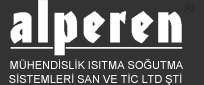
<style>
.page{position:relative;width:204px;height:85px;background:#333333}
.page>*{position:absolute;margin:0}
.t1{font:11px "ArialMT";color:#ffffff}
</style>
<div class="page">
<p class="t1" style="left:10px;top:59px;width:173px;height:10px">MÜHENDİSLİK ISITMA SOĞUTMA</p>
<p class="t1" style="left:9px;top:73px;width:173px;height:13px">SİSTEMLERİ SAN VE TİC LTD ŞTİ</p>
</div>
